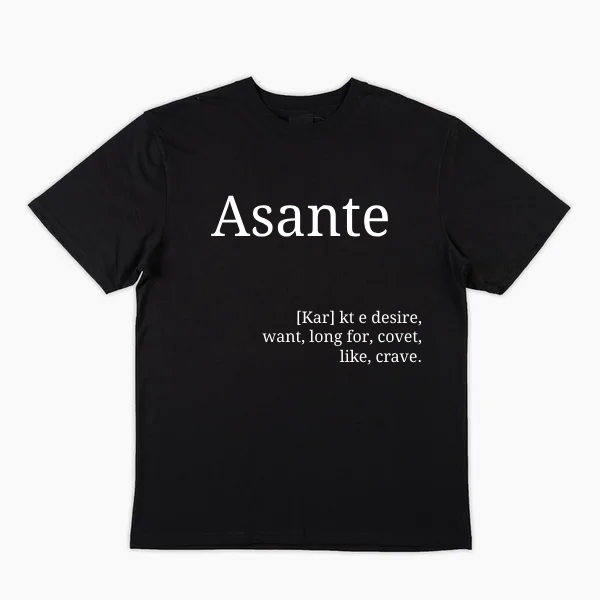
<style>
.page{position:relative;width:600px;height:600px;background:#f9f9f9}
.page>*{position:absolute;margin:0}
.t1{font:56.5px "DroidSerif";color:#ffffff}
.t2{font:16px "DroidSerif";color:#ffffff}
</style>
<div class="page">
<p class="t1" style="left:211px;top:195px;width:177px;height:42px">Asante</p>
<p class="t2" style="left:262px;top:310px;width:160px;height:55px;text-align:right">[Kar] kt e desire, want, long for, covet, like, crave.</p>
</div>
